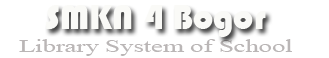
<style>
.page{position:relative;width:329px;height:58px;background:#ffffff}
.page>*{position:absolute;margin:0}
.t1{font:36px "Bauhaus93";color:#fafaf7}
.t2{font:18px "TimesNewRomanPSMT";color:#bab6b6;scale:1.47 1}
</style>
<div class="page">
<p class="t1" style="left:46px;top:5px;width:220px;height:32px">SMKN 4 Bogor</p>
<p class="t2" style="left:19px;top:39px;width:273px;height:17px">Library System of School</p>
</div>
